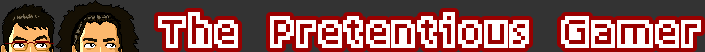
<style>
.page{position:relative;width:705px;height:52px;background:#333333}
.page>*{position:absolute;margin:0}
.t1{font:50px "Half-Life 2";letter-spacing:0.05em;color:#ffffff}
</style>
<div class="page">
<p class="t1" style="left:158px;top:12px;width:543px;height:36px">The Pretentious Gamer</p>
</div>
